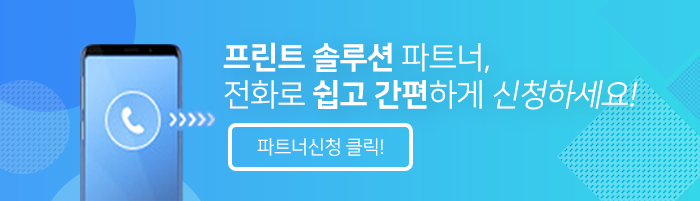
<style>
.page{position:relative;width:700px;height:201px}
.page>*{position:absolute;margin:0}
.t1{font:31px "NanumSquareR";letter-spacing:-0.025em;color:#ffffff}
.t2{font:31px "NanumSquareEB";letter-spacing:-0.025em;color:#ffffff}
.t3{font:31px "NanumSquareR";letter-spacing:-0.025em;color:#ffffff;font-style:italic}
.t4{font:19px "NanumSquareR";letter-spacing:-0.025em;color:#ffffff}
</style>
<div class="page">
<p class="t1" style="left:223px;top:42px;width:415px;height:68px"><span class="t2">프린트 솔루션</span> 파트너, <br>전화로 <span class="t2">쉽고 간편</span>하게 <span class="t3">신청하세요!</span></p>
<p class="t4" style="left:257px;top:138px;width:126px;height:18px">파트너신청 클릭!</p>
</div>
